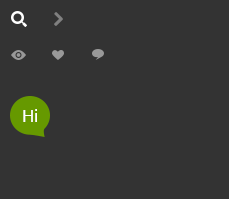
<style>
.page{position:relative;width:229px;height:199px;background:#333333}
.page>*{position:absolute;margin:0}
.t1{font:16px "MicrosoftYaHei";color:#ffffff}
</style>
<div class="page">
<p class="t1" style="left:23px;top:109px;width:14px;height:13px">Hi</p>
</div>
